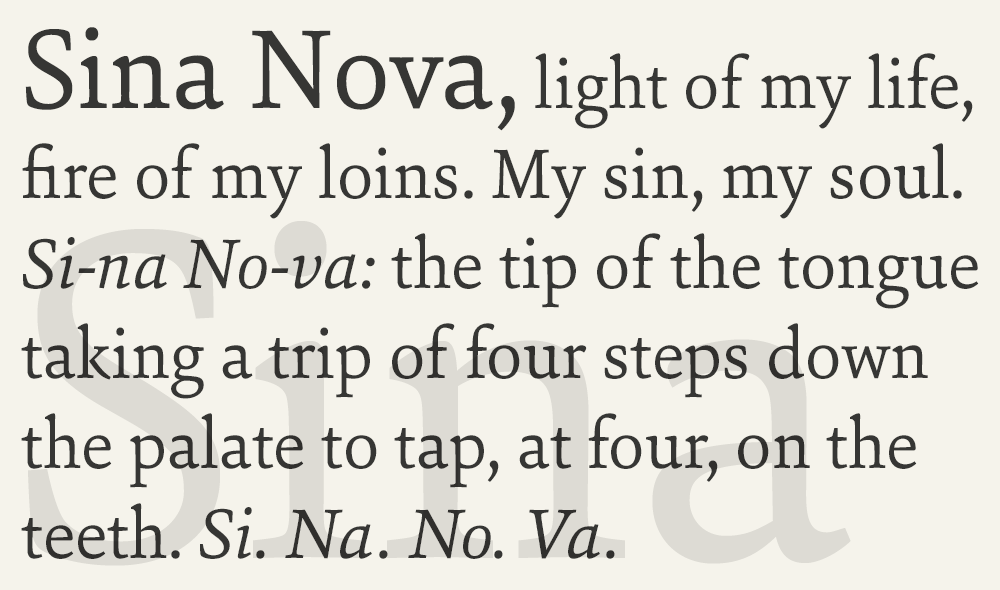
<style>
.page{position:relative;width:1000px;height:590px;background:#f5f3eb}
.page>*{position:absolute;margin:0}
.t1{font:75px "SinaNova-Regular";color:#363634}
.t2{font:120px "SinaNova-Regular";color:#363634}
.t3{font:75px "SinaNova-Italic";color:#363634}
</style>
<div class="page">
<p class="t1" style="left:21px;top:27px;width:958px;height:532px"><span class="t2">Sina Nova,</span> light of my life,<br>fire of my loins. My sin, my soul.<br><span class="t3">Si-na No-va:</span> the tip of the tongue<br>taking a trip of four steps down<br>the palate to tap, at four, on the<br>teeth. <span class="t3">Si. Na. No. Va.</span></p>
</div>
